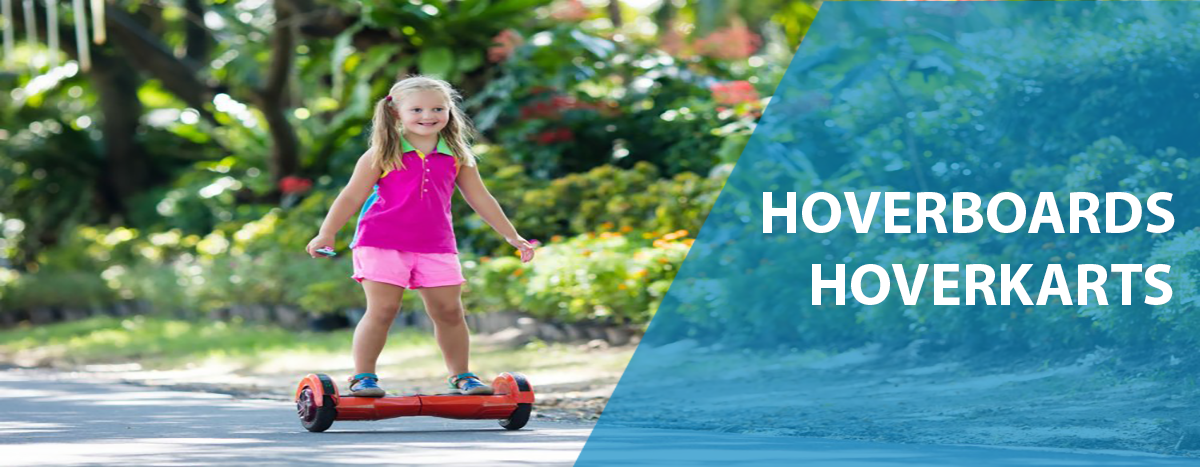
<style>
.page{position:relative;width:1200px;height:467px}
.page>*{position:absolute;margin:0}
.t1{font:60px "MyriadPro-Bold";color:#ffffff}
</style>
<div class="page">
<p class="t1" style="left:763px;top:192px;width:412px;height:113px">HOVERBOARDS<br>    HOVERKARTS</p>
</div>
